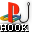
<style>
.page{position:relative;width:32px;height:32px;background:#ffffff}
.page>*{position:absolute;margin:0}
.t1{font:9px "TimesNewRomanPSMT";color:#ffffff}
</style>
<div class="page">
<p class="t1" style="left:0px;top:24px;width:28px;height:7px">HOOK</p>
</div>
